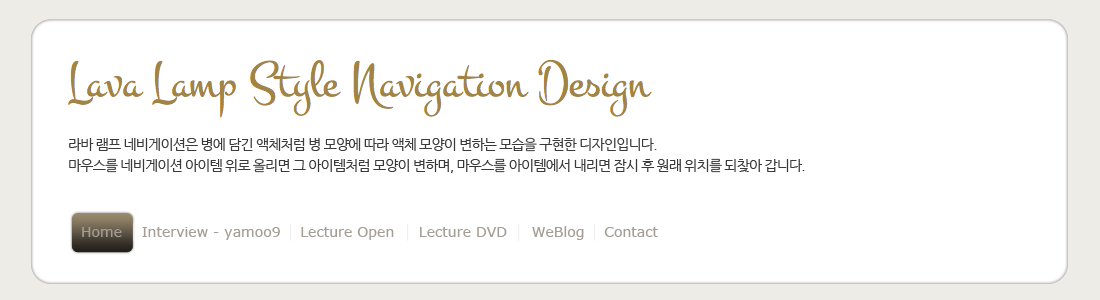
<style>
.page{position:relative;width:1100px;height:300px;background:#ffffff}
.page>*{position:absolute;margin:0}
.t1{font:14px/21px "NanumGothic";letter-spacing:-0.06em;color:#393939}
.t2{font:14px "Verdana";color:#a49e96}
</style>
<div class="page">
<p class="t1" style="left:69px;top:137px;width:736px;height:36px">라바 램프 네비게이션은 병에 담긴 액체처럼 병 모양에 따라 액체 모양이 변하는 모습을 구현한 디자인입니다.<br>마우스를 네비게이션 아이템 위로 올리면 그 아이템처럼 모양이 변하며, 마우스를 아이템에서 내리면 잠시 후 원래 위치를 되찾아 갑니다.</p>
<p class="t2" style="left:82px;top:226px;width:576px;height:14px">Home    Interview - yamoo9    Lecture Open     Lecture DVD     WeBlog    Contact</p>
</div>
